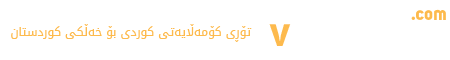
<style>
.page{position:relative;width:450px;height:60px;background:#ffffff}
.page>*{position:absolute;margin:0}
.t1{font:18.4px "Uni-Sans-Bold";color:#fdba4d}
.t2{font:12px "DroidArabicKufi";color:#fdba4d}
.t3{font:41.2px "Uni-Sans-Bold";color:#fdba4d}
</style>
<div class="page">
<p class="t1" style="left:411px;top:9px;width:35px;height:11px">.com</p>
<p class="t2" style="left:11px;top:24px;width:241px;height:18px">تۆڕی کۆمەڵایەتی کوردی بۆ خەڵکی کوردستان</p>
<p class="t3" style="left:269px;top:24px;width:22px;height:22px">v</p>
</div>
